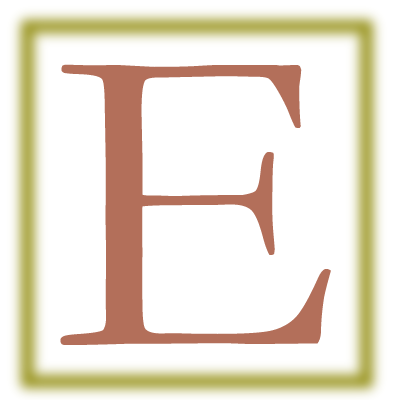
<style>
.page{position:relative;width:400px;height:400px;background:#ffffff}
.page>*{position:absolute;margin:0}
.t1{font:444.4px "Garamond";letter-spacing:-0.025em;color:#b36f5a}
</style>
<div class="page">
<p class="t1" style="left:60px;top:64px;width:271px;height:281px">E</p>
</div>
